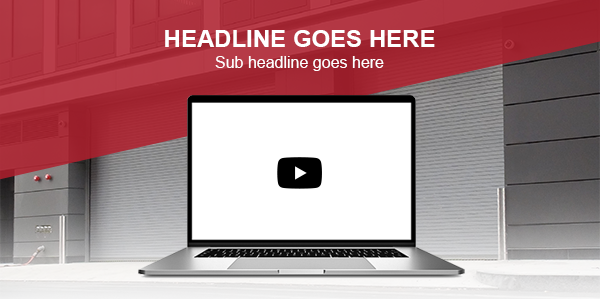
<style>
.page{position:relative;width:600px;height:299px}
.page>*{position:absolute;margin:0}
.t1{font:16px/20.2px "ArialMT";color:#ffffff}
.t2{font:24px/16.6px "Arial-BoldMT";color:#ffffff;text-transform:uppercase}
</style>
<div class="page">
<p class="t1" style="left:165px;top:30px;width:270px;height:41px;text-align:center"><span class="t2">Headline Goes Here<br></span>Sub headline goes here</p>
</div>
